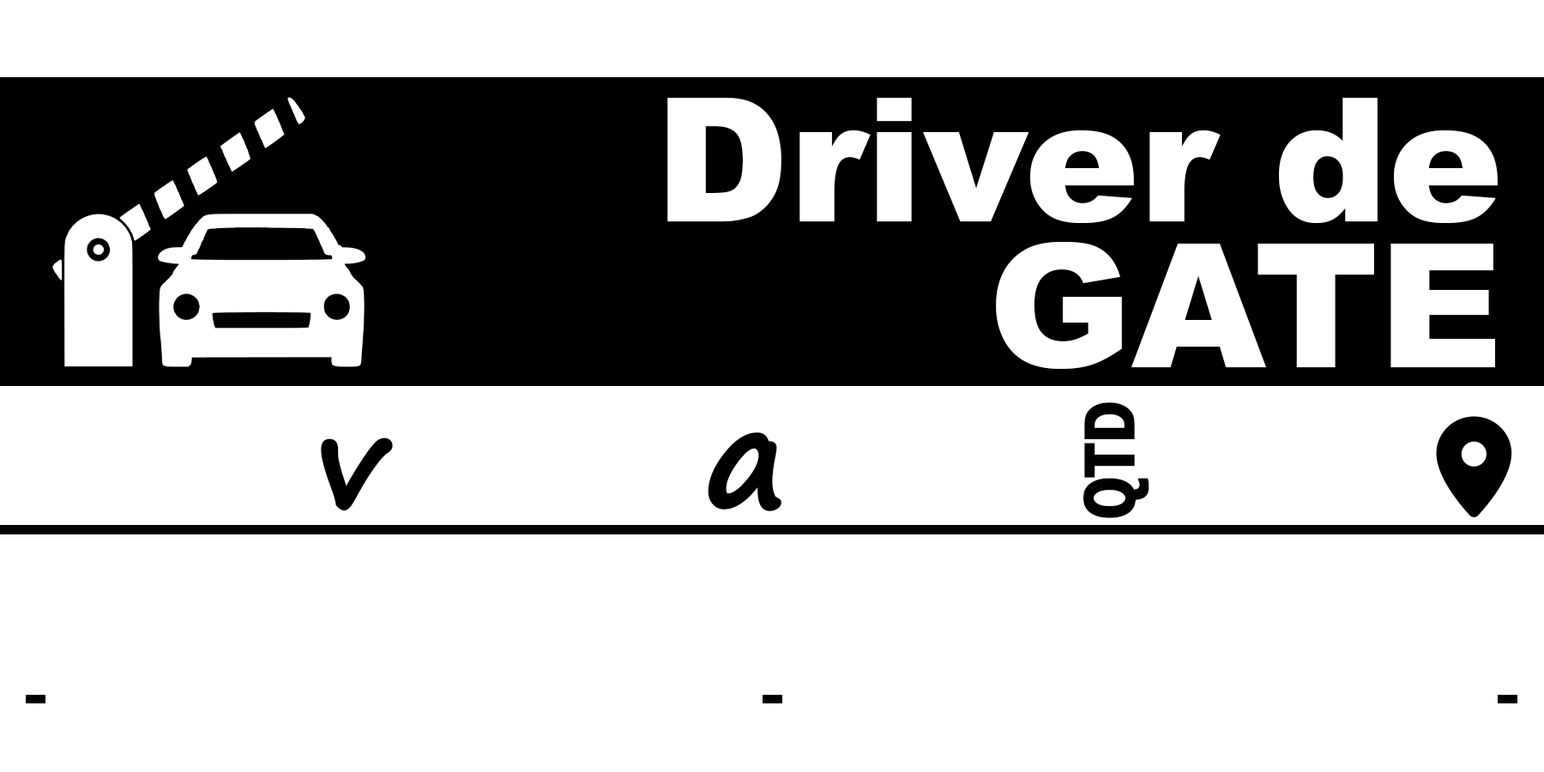
<style>
.page{position:relative;width:1544px;height:772px;background:#ffffff}
.page>*{position:absolute;margin:0}
.t1{font:172.5px/145.3px "Arial-Black";color:#ffffff}
.t2{font:68.1px "Tahoma-Bold";letter-spacing:-0.01em;color:#000000;font-weight:bold;scale:0.79 1}
.t3{font:125.2px "SegoePrint-Bold";letter-spacing:-0.01em;color:#000000;font-weight:bold}
.t4{font:138.6px "SegoePrint-Bold";letter-spacing:-0.01em;color:#000000;font-weight:bold}
</style>
<div class="page">
<p class="t1" style="left:667px;top:98px;width:831px;height:271px;text-align:right">Driver de<br>GATE</p>
<p class="t2" style="left:1084px;top:402px;width:66px;height:116px;rotate:-90deg">QTD</p>
<p class="t3" style="left:321px;top:438px;width:72px;height:73px">v</p>
<p class="t4" style="left:708px;top:432px;width:74px;height:79px">a</p>
</div>
